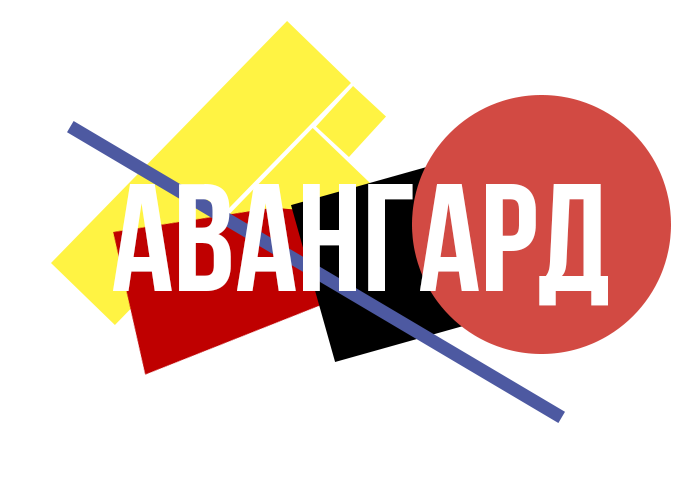
<style>
.page{position:relative;width:700px;height:500px;background:#ffffff}
.page>*{position:absolute;margin:0}
.t1{font:152.4px "BebasNeueBold";color:#ffffff}
</style>
<div class="page">
<p class="t1" style="left:113px;top:184px;width:495px;height:122px">авангард</p>
</div>
